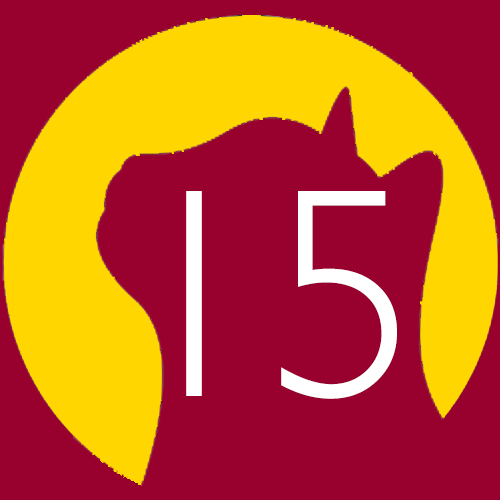
<style>
.page{position:relative;width:500px;height:500px;background:#98012e}
.page>*{position:absolute;margin:0}
.t1{font:300px "GillSans-Light";color:#ffffff}
</style>
<div class="page">
<p class="t1" style="left:186px;top:191px;width:211px;height:208px">15</p>
</div>
